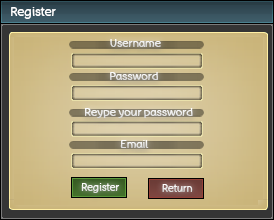
<style>
.page{position:relative;width:274px;height:220px}
.page>*{position:absolute;margin:0}
.t1{font:12px "BadComic";color:#ffffff}
.t2{font:11.1px "BadComic";color:#ebebeb}
.t3{font:11.1px "BadComic";color:#f0f0f0}
.t4{font:11.1px "BadComic";color:#eeeeee}
.t5{font:10px "BadComic";color:#ffffff}
</style>
<div class="page">
<p class="t1" style="left:11px;top:7px;width:45px;height:12px">Register</p>
<p class="t2" style="left:110px;top:39px;width:51px;height:8px">Username</p>
<p class="t2" style="left:110px;top:72px;width:48px;height:8px">Password</p>
<p class="t3" style="left:85px;top:108px;width:108px;height:10px">Reype your password</p>
<p class="t4" style="left:120px;top:140px;width:29px;height:8px">Email</p>
<p class="t5" style="left:81px;top:183px;width:39px;height:10px">Register</p>
<p class="t5" style="left:162px;top:184px;width:31px;height:8px">Return</p>
</div>
